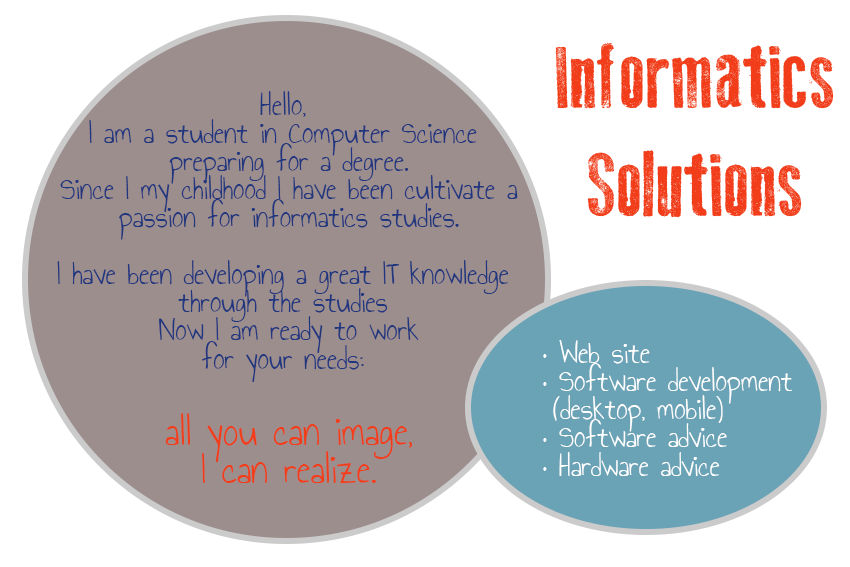
<style>
.page{position:relative;width:850px;height:567px;background:#ffffff}
.page>*{position:absolute;margin:0}
.t1{font:90px "OldPress";color:#f13d1a}
.t2{font:23.5px "AnnieUseYourTelescope";color:#20367f}
.t3{font:31.8px "AnnieUseYourTelescope";color:#f13d1a}
.t4{font:23.5px "AnnieUseYourTelescope";color:#ffffff}
</style>
<div class="page">
<p class="t1" style="left:555px;top:42px;width:279px;height:176px;text-align:center">Informatics<br>Solutions</p>
<p class="t2" style="left:57px;top:91px;width:461px;height:393px;text-align:center">Hello, <br>I am a student in Computer Science <br>preparing for a degree.<br>Since I my childhood I have been cultivate a<br>passion for informatics studies.<br><br>I have been developing a great IT knowledge <br>through the studies <br>Now I am ready to work<br>for your needs: <br><span class="t3"><br>all you can image,<br>I can realize.</span></p>
<p class="t4" style="left:543px;top:340px;width:250px;height:136px">• Web site <br>• Software development<br> (desktop, mobile)<br>• Software advice<br>• Hardware advice</p>
</div>
